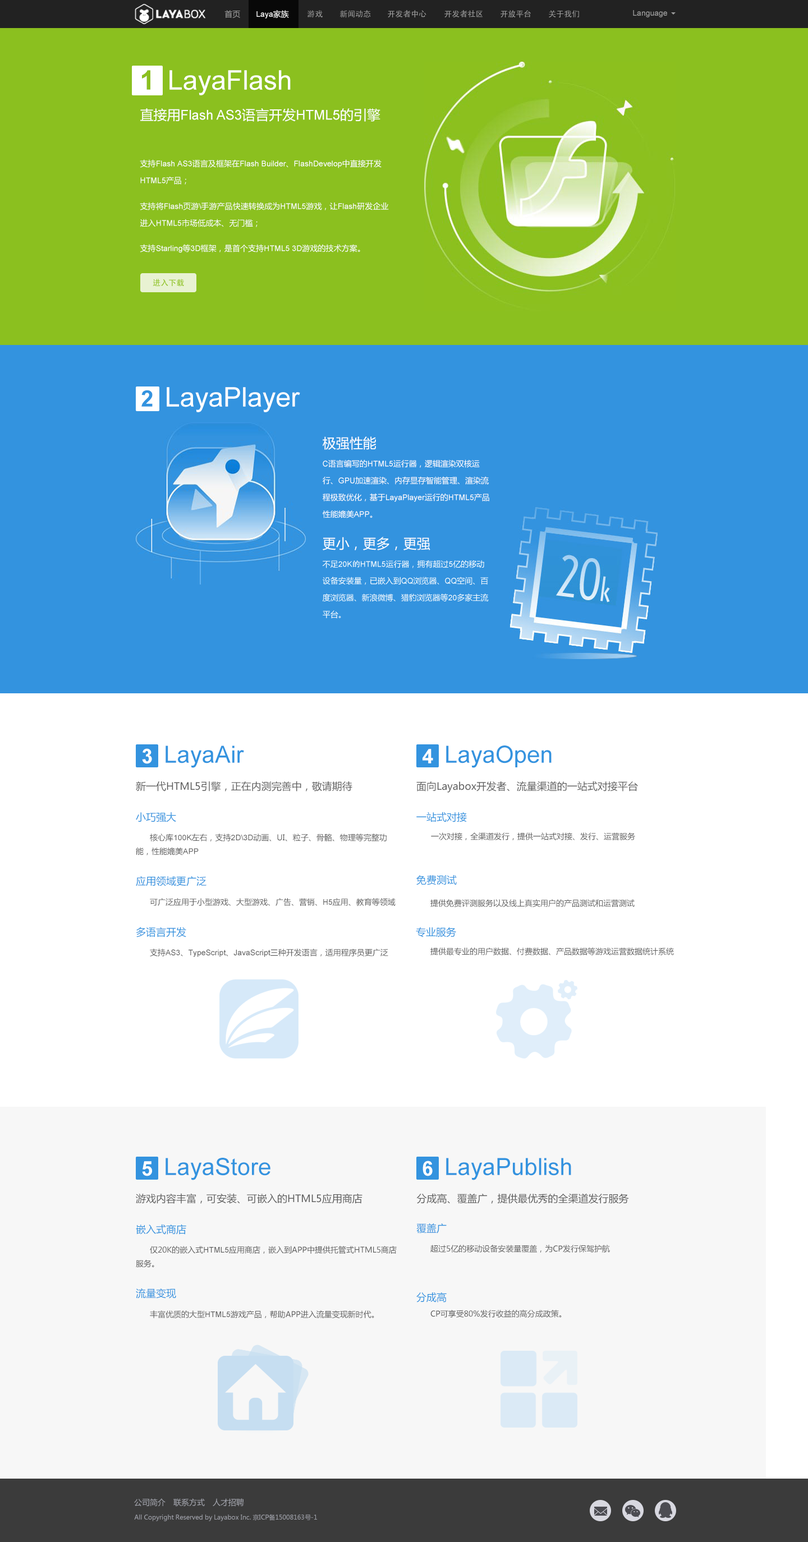
<style>
.page{position:relative;width:808px;height:1542px;background:#ffffff}
.page>*{position:absolute;margin:0}
.t1{font:7.9px "MicrosoftYaHei";color:#9d9d9d}
.t2{font:7.9px "ArialMT";color:#ffffff}
.t3{font:7.9px "MicrosoftYaHei";color:#ffffff}
.t4{font:7.9px "AdobeHeitiStd-Regular";color:#9d9d9d}
.t5{font:7.9px "ArialMT";color:#9d9d9d}
.t6{font:26.9px "Arial-BoldMT";color:#8bc01f}
.t7{font:26.9px "ArialMT";color:#ffffff}
.t8{font:13.5px "ArialMT";color:#ffffff}
.t9{font:13.5px "MicrosoftYaHei";color:#ffffff}
.t10{font:7.9px/16.9px "ArialMT";color:#ffffff}
.t11{font:7.9px/16.9px "MicrosoftYaHei";color:#ffffff}
.t12{font:7.9px "AdobeHeitiStd-Regular";color:#8bc01f}
.t13{font:22.4px "Arial-BoldMT";color:#3393df}
.t14{font:7.9px/16.8px "MicrosoftYaHei";color:#ffffff}
.t15{font:7.9px/16.8px "ArialMT";color:#ffffff}
.t16{font:7.9px/16.8px "AdobeHeitiStd-Regular";color:#ffffff}
.t17{font:20.2px "Arial-BoldMT";color:#ffffff}
.t18{font:23.6px "ArialMT";color:#3393df}
.t19{font:10.1px "MicrosoftYaHei";color:#5d5d5d}
.t20{font:10.1px "MicrosoftYaHei";color:#3393df}
.t21{font:7.9px "MicrosoftYaHei";color:#5d5d5d}
.t22{font:7.9px "ArialMT";color:#5d5d5d}
.t23{font:7.9px "MicrosoftYaHei";color:#a1a3ab}
.t24{font:6.3px "MicrosoftYaHei";color:#a1a3ab}
</style>
<div class="page">
<p class="t1" style="left:224px;top:10px;width:16px;height:8px">首页</p>
<p class="t2" style="left:256px;top:10px;width:33px;height:9px">Laya<span class="t3">家族</span></p>
<p class="t4" style="left:307px;top:10px;width:16px;height:7px">游戏</p>
<p class="t4" style="left:340px;top:10px;width:31px;height:8px">新闻动态</p>
<p class="t4" style="left:388px;top:10px;width:38px;height:8px">开发者中心</p>
<p class="t4" style="left:444px;top:10px;width:38px;height:7px">开发者社区</p>
<p class="t4" style="left:500px;top:10px;width:31px;height:8px">开放平台</p>
<p class="t4" style="left:549px;top:10px;width:30px;height:8px">关于我们</p>
<p class="t5" style="left:633px;top:10px;width:34px;height:7px">Language</p>
<p class="t6" style="left:142px;top:70px;width:8px;height:20px">1</p>
<p class="t7" style="left:169px;top:70px;width:122px;height:25px">LayaFlash</p>
<p class="t8" style="left:140px;top:108px;width:240px;height:14px"><span class="t9">直接用</span>Flash AS3<span class="t9">语言开发</span>HTML5<span class="t9">的引擎</span></p>
<p class="t10" style="left:140px;top:159px;width:241px;height:26px"><span class="t11">支持</span>Flash AS3<span class="t11">语言及框架在</span>Flash Builder<span class="t11">、</span>FlashDevelop<span class="t11">中直接开发<br></span>HTML5<span class="t11">产品；</span></p>
<p class="t11" style="left:140px;top:202px;width:249px;height:25px">支持将<span class="t10">Flash</span>页游<span class="t10">\</span>手游产品快速转换成为<span class="t10">HTML5</span>游戏，让<span class="t10">Flash</span>研发企业<br>进入<span class="t10">HTML5</span>市场低成本、无门槛；</p>
<p class="t2" style="left:140px;top:244px;width:220px;height:9px"><span class="t3">支持</span>Starling<span class="t3">等</span>3D<span class="t3">框架，是首个支持</span>HTML5 3D<span class="t3">游戏的技术方案。</span></p>
<p class="t12" style="left:153px;top:279px;width:31px;height:8px">进入下载</p>
<p class="t13" style="left:141px;top:390px;width:12px;height:17px">2</p>
<p class="t7" style="left:167px;top:387px;width:133px;height:25px">LayaPlayer</p>
<p class="t9" style="left:323px;top:436px;width:53px;height:14px">极强性能</p>
<p class="t14" style="left:323px;top:459px;width:166px;height:59px"><span class="t15">C</span>语言编写的<span class="t15">HTML5</span>运行器，逻辑渲染双核运<br>行、<span class="t15">GPU</span>加速渲染、内存显存智能管理、渲染流<br>程极致优化，基于<span class="t15">LayaPlayer</span>运行的<span class="t15">HTML5</span>产品<br>性能媲美<span class="t15">APP</span>。</p>
<p class="t9" style="left:323px;top:537px;width:107px;height:13px">更小，更多，更强</p>
<p class="t14" style="left:322px;top:560px;width:167px;height:59px">不足<span class="t15">20K</span><span class="t16">的</span><span class="t15">HTML5</span>运行器，拥有超过<span class="t15">5</span>亿的移动<br>设备安装量，已嵌入到<span class="t15">QQ</span>浏览器、<span class="t15">QQ</span>空间、百<br>度浏览器、新浪微博、猎豹浏览器等<span class="t15">20</span>多家主流<br>平台。</p>
<p class="t17" style="left:142px;top:748px;width:10px;height:16px">3</p>
<p class="t18" style="left:165px;top:746px;width:79px;height:22px">LayaAir</p>
<p class="t17" style="left:422px;top:749px;width:11px;height:15px">4</p>
<p class="t18" style="left:446px;top:746px;width:105px;height:22px">LayaOpen</p>
<p class="t19" style="left:136px;top:781px;width:216px;height:11px">新一代HTML5引擎，正在内测完善中，敬请期待</p>
<p class="t19" style="left:416px;top:781px;width:222px;height:12px">面向Layabox开发者、流量渠道的一站式对接平台</p>
<p class="t20" style="left:136px;top:812px;width:40px;height:10px">小巧强大</p>
<p class="t20" style="left:416px;top:812px;width:51px;height:10px">一站式对接</p>
<p class="t21" style="left:136px;top:834px;width:251px;height:22px">核心库<span class="t22">100K</span>左右，支持<span class="t22">2D\3D</span>动画、UI、粒子、骨骼、物理等完整功<br>能，性能媲美<span class="t22">APP</span></p>
<p class="t21" style="left:431px;top:833px;width:204px;height:7px">一次对接，全渠道发行，提供一站式对接、发行、运营服务</p>
<p class="t20" style="left:136px;top:876px;width:70px;height:10px">应用领域更广泛</p>
<p class="t20" style="left:416px;top:875px;width:41px;height:10px">免费测试</p>
<p class="t21" style="left:150px;top:898px;width:246px;height:8px">可广泛应用于小型游戏、大型游戏、广告、营销、<span class="t22">H5</span>应用、教育等领域</p>
<p class="t21" style="left:430px;top:899px;width:204px;height:8px">提供免费评测服务以及线上真实用户的产品测试和运营测试</p>
<p class="t20" style="left:136px;top:927px;width:50px;height:10px">多语言开发</p>
<p class="t20" style="left:416px;top:927px;width:40px;height:10px">专业服务</p>
<p class="t21" style="left:150px;top:949px;width:238px;height:8px">支持<span class="t22">AS3</span>、<span class="t22">TypeScript</span>、<span class="t22">JavaScript</span>三种开发语言，适用程序员更广泛</p>
<p class="t21" style="left:430px;top:948px;width:244px;height:7px">提供最专业的用户数据、付费数据、产品数据等游戏运营数据统计系统</p>
<p class="t18" style="left:165px;top:1158px;width:105px;height:22px">LayaStore</p>
<p class="t18" style="left:446px;top:1158px;width:125px;height:22px">LayaPublish</p>
<p class="t17" style="left:142px;top:1161px;width:10px;height:15px">5</p>
<p class="t17" style="left:422px;top:1161px;width:11px;height:15px">6</p>
<p class="t19" style="left:136px;top:1193px;width:226px;height:11px">游戏内容丰富，可安装、可嵌入的HTML5应用商店</p>
<p class="t19" style="left:416px;top:1193px;width:213px;height:11px">分成高、覆盖广，提供最优秀的全渠道发行服务</p>
<p class="t20" style="left:136px;top:1224px;width:50px;height:11px">嵌入式商店</p>
<p class="t20" style="left:416px;top:1223px;width:31px;height:11px">覆盖广</p>
<p class="t21" style="left:136px;top:1246px;width:261px;height:22px">仅20K的嵌入式<span class="t22">HTML5</span>应用商店，嵌入到APP中提供托管式HTML5商店<br>服务。</p>
<p class="t21" style="left:430px;top:1245px;width:180px;height:8px">超过5亿的移动设备安装量覆盖，为CP发行保驾护航</p>
<p class="t20" style="left:136px;top:1288px;width:40px;height:11px">流量变现</p>
<p class="t20" style="left:416px;top:1293px;width:31px;height:10px">分成高</p>
<p class="t21" style="left:150px;top:1310px;width:224px;height:8px">丰富优质的大型<span class="t22">HTML5</span>游戏产品，帮助APP进入流量变现新时代。</p>
<p class="t21" style="left:430px;top:1310px;width:132px;height:8px">CP可享受80%发行收益的高分成政策。</p>
<p class="t23" style="left:134px;top:1498px;width:31px;height:9px">公司简介</p>
<p class="t23" style="left:173px;top:1498px;width:32px;height:9px">联系方式</p>
<p class="t23" style="left:213px;top:1498px;width:31px;height:9px">人才招聘</p>
<p class="t24" style="left:134px;top:1514px;width:183px;height:7px">All Copyright Reserved by Layabox Inc. 京ICP备15008163号-1</p>
</div>
